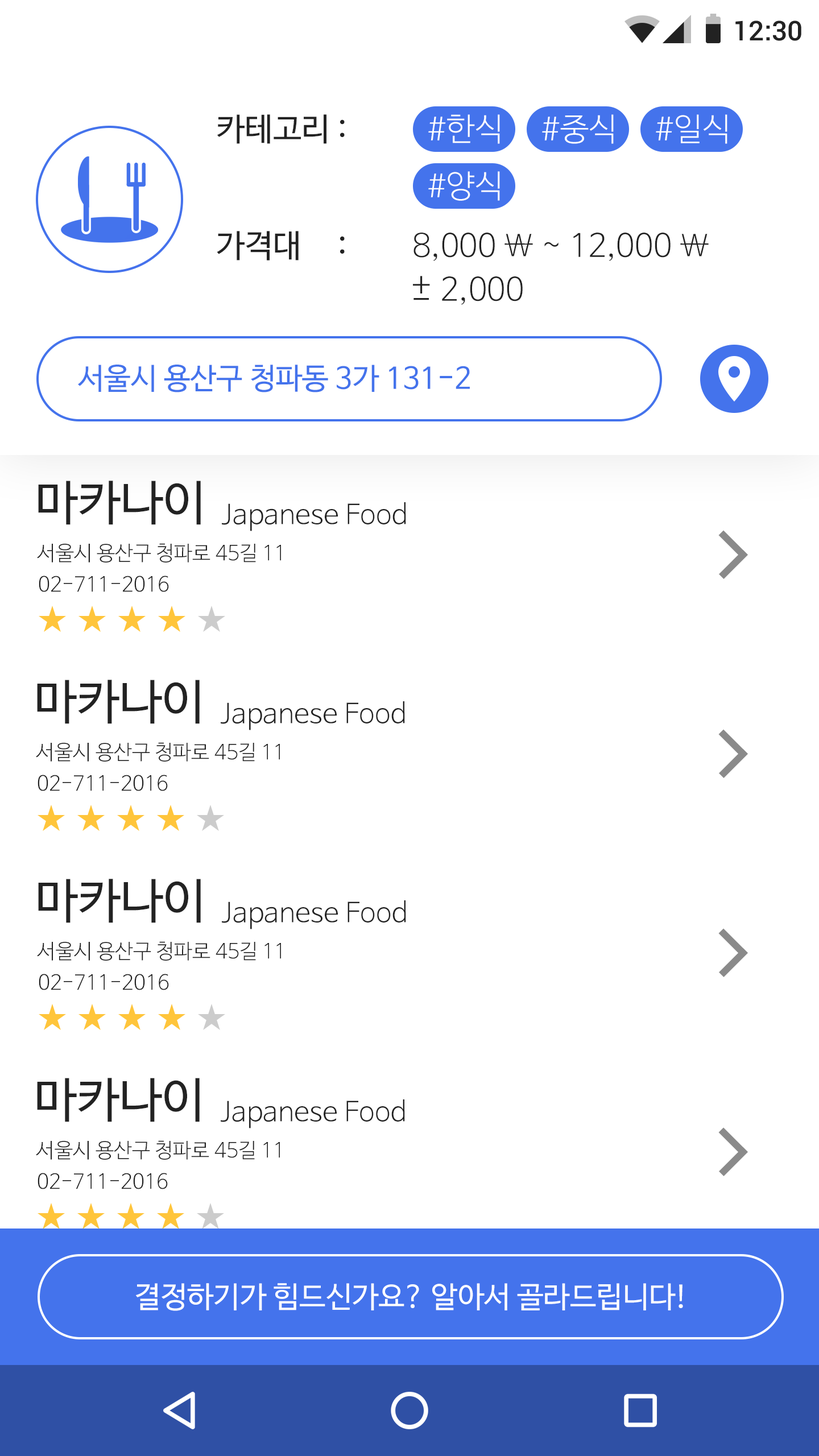
<style>
.page{position:relative;width:819px;height:1456px;background:#ffffff}
.page>*{position:absolute;margin:0}
.t1{font:27.3px "Roboto-Medium";color:#222222}
.t2{font:31.8px "NanumBarunGothic";color:#222222}
.t3{font:31.8px "NanumBarunGothicLight";color:#ffffff}
.t4{font:31.8px "NanumBarunGothicLight";color:#222222}
.t5{font:36.4px "NanumBarunGothicLight";color:#222222}
.t6{font:29.6px "NanumBarunGothic";color:#4473ec}
.t7{font:47.8px "NanumBarunGothic";color:#222222}
.t8{font:27.3px "NanumBarunGothicLight";color:#222222}
.t9{font:20.5px "NanumBarunGothicLight";color:#222222}
.t10{font:29.6px "NanumBarunGothic";color:#ffffff}
</style>
<div class="page">
<p class="t1" style="left:735px;top:20px;width:66px;height:21px">12:30</p>
<p class="t2" style="left:217px;top:114px;width:128px;height:30px">카테고리 :</p>
<p class="t3" style="left:428px;top:114px;width:72px;height:30px">#한식</p>
<p class="t3" style="left:542px;top:114px;width:72px;height:30px">#중식</p>
<p class="t3" style="left:656px;top:114px;width:71px;height:30px">#일식</p>
<p class="t3" style="left:428px;top:171px;width:72px;height:30px">#양식</p>
<p class="t2" style="left:217px;top:231px;width:128px;height:29px">가격대     :</p>
<p class="t4" style="left:413px;top:233px;width:296px;height:28px">8,000 \ ~ 12,000 \</p>
<p class="t5" style="left:413px;top:276px;width:17px;height:17px">+</p>
<p class="t4" style="left:442px;top:276px;width:81px;height:29px">2,000</p>
<p class="t5" style="left:413px;top:298px;width:16px;height:2px">-</p>
<p class="t6" style="left:78px;top:365px;width:392px;height:27px">서울시 용산구 청파동 3가 131-2</p>
<p class="t7" style="left:38px;top:481px;width:163px;height:44px">마카나이</p>
<p class="t8" style="left:222px;top:502px;width:184px;height:29px">Japanese Food</p>
<p class="t9" style="left:37px;top:543px;width:244px;height:19px">서울시 용산구 청파로 45길 11</p>
<p class="t9" style="left:39px;top:576px;width:130px;height:16px">02-711-2016</p>
<p class="t7" style="left:37px;top:680px;width:163px;height:44px">마카나이</p>
<p class="t8" style="left:221px;top:701px;width:184px;height:29px">Japanese Food</p>
<p class="t9" style="left:36px;top:742px;width:244px;height:20px">서울시 용산구 청파로 45길 11</p>
<p class="t9" style="left:38px;top:775px;width:130px;height:16px">02-711-2016</p>
<p class="t7" style="left:38px;top:879px;width:163px;height:44px">마카나이</p>
<p class="t8" style="left:222px;top:900px;width:184px;height:29px">Japanese Food</p>
<p class="t9" style="left:37px;top:941px;width:244px;height:20px">서울시 용산구 청파로 45길 11</p>
<p class="t9" style="left:39px;top:974px;width:130px;height:16px">02-711-2016</p>
<p class="t7" style="left:37px;top:1078px;width:163px;height:44px">마카나이</p>
<p class="t8" style="left:221px;top:1099px;width:184px;height:29px">Japanese Food</p>
<p class="t9" style="left:36px;top:1140px;width:244px;height:20px">서울시 용산구 청파로 45길 11</p>
<p class="t9" style="left:38px;top:1173px;width:130px;height:16px">02-711-2016</p>
<p class="t10" style="left:135px;top:1283px;width:548px;height:28px">결정하기가 힘드신가요? 알아서 골라드립니다!</p>
</div>
